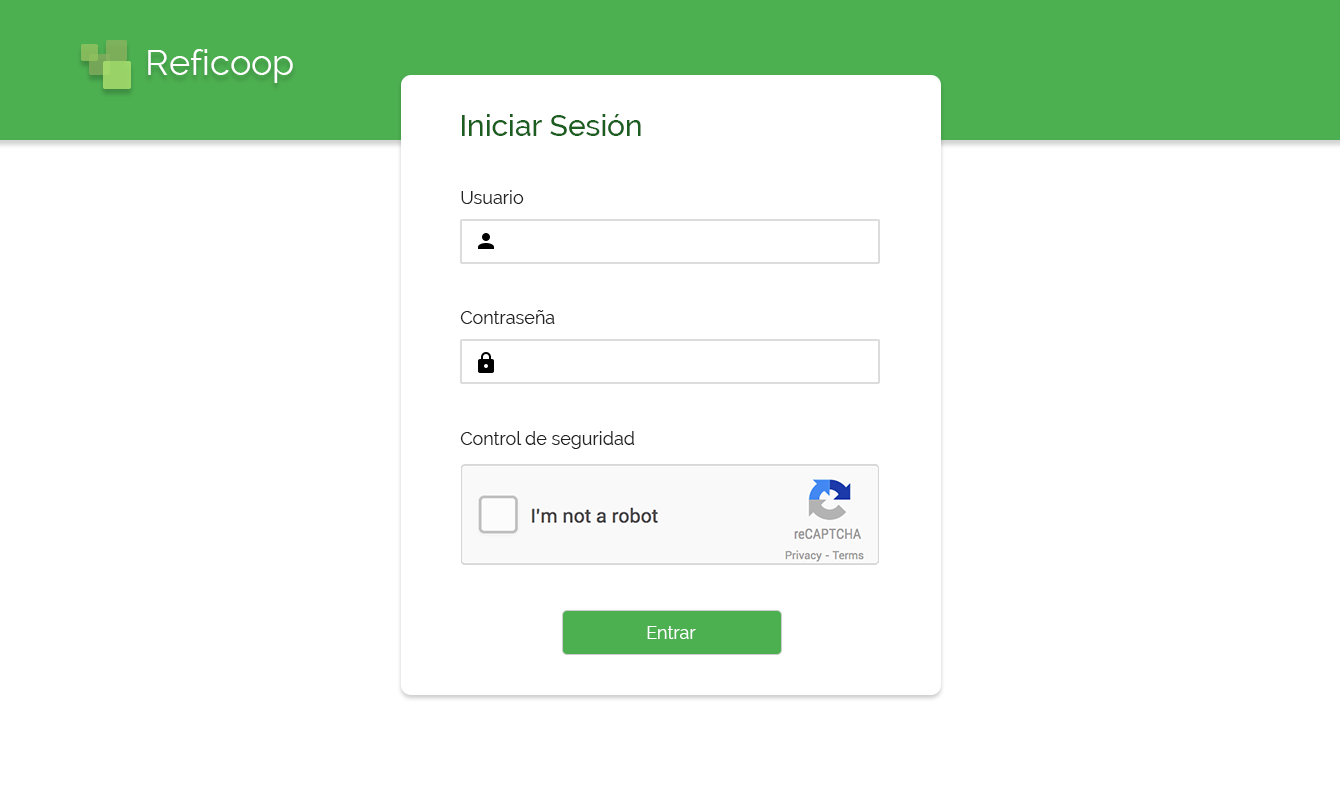
<style>
.page{position:relative;width:1340px;height:800px;background:#ffffff}
.page>*{position:absolute;margin:0}
.t1{font:36px "Raleway";color:#ffffff}
.t2{font:30px "Raleway-Medium";color:#1b5e20}
.t3{font:18px "Raleway";color:#232323}
.t4{font:18px "Raleway";color:#ffffff}
</style>
<div class="page">
<p class="t1" style="left:148px;top:49px;width:145px;height:34px">Reficoop</p>
<p class="t2" style="left:462px;top:114px;width:179px;height:22px">Iniciar Sesión</p>
<p class="t3" style="left:461px;top:190px;width:63px;height:14px">Usuario</p>
<p class="t3" style="left:460px;top:310px;width:95px;height:14px">Contraseña</p>
<p class="t3" style="left:460px;top:431px;width:175px;height:18px">Control de seguridad</p>
<p class="t4" style="left:647px;top:626px;width:49px;height:13px">Entrar</p>
</div>
